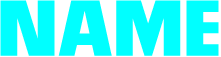
<style>
.page{position:relative;width:221px;height:57px;background:#00ffff}
.page>*{position:absolute;margin:0}
.t1{font:72px "NeographikMT";color:#00ffff}
</style>
<div class="page">
<p class="t1" style="left:0px;top:0px;width:219px;height:56px">NAME</p>
</div>
